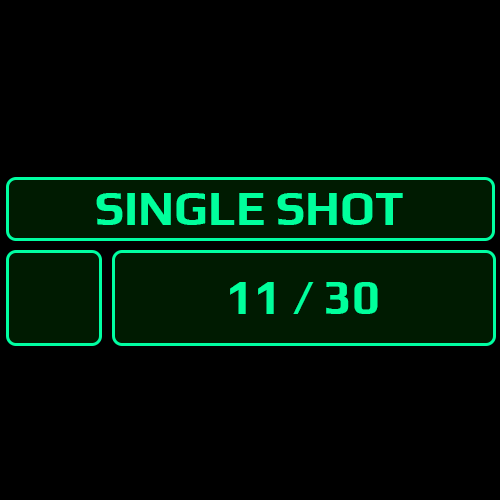
<style>
.page{position:relative;width:500px;height:500px;background:#000000}
.page>*{position:absolute;margin:0}
.t1{font:48px "Play-Bold";color:#00ff9c}
</style>
<div class="page">
<p class="t1" style="left:96px;top:193px;width:307px;height:32px">SINGLE SHOT</p>
<p class="t1" style="left:230px;top:282px;width:148px;height:32px">11 / 30</p>
</div>
